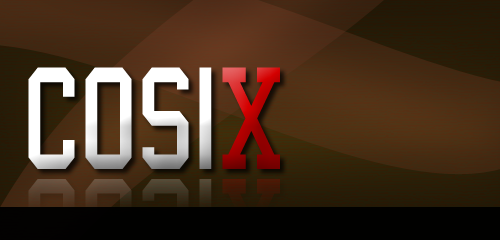
<style>
.page{position:relative;width:500px;height:240px}
.page>*{position:absolute;margin:0}
.t1{font:148.2px "College";scale:0.79 1}
</style>
<div class="page">
<p class="t1" style="left:28px;top:67px;width:252px;height:102px">CosiX</p>
</div>
